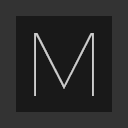
<style>
.page{position:relative;width:128px;height:128px;background:#191919}
.page>*{position:absolute;margin:0}
.t1{font:90px "Montserrat-Hairline";color:#cccccc}
</style>
<div class="page">
<p class="t1" style="left:34px;top:33px;width:60px;height:63px">M</p>
</div>
